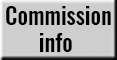
<style>
.page{position:relative;width:117px;height:60px;background:#cecece}
.page>*{position:absolute;margin:0}
.t1{font:23px "Oswald-Medium";color:#000000}
</style>
<div class="page">
<p class="t1" style="left:6px;top:6px;width:105px;height:46px;text-align:center">Commission<br>info</p>
</div>
